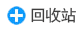
<style>
.page{position:relative;width:84px;height:30px;background:#ffffff}
.page>*{position:absolute;margin:0}
.t1{font:16px "SimHei";letter-spacing:-0.05em;color:#3f3e3e}
</style>
<div class="page">
<p class="t1" style="left:31px;top:7px;width:45px;height:16px">回收站</p>
</div>
